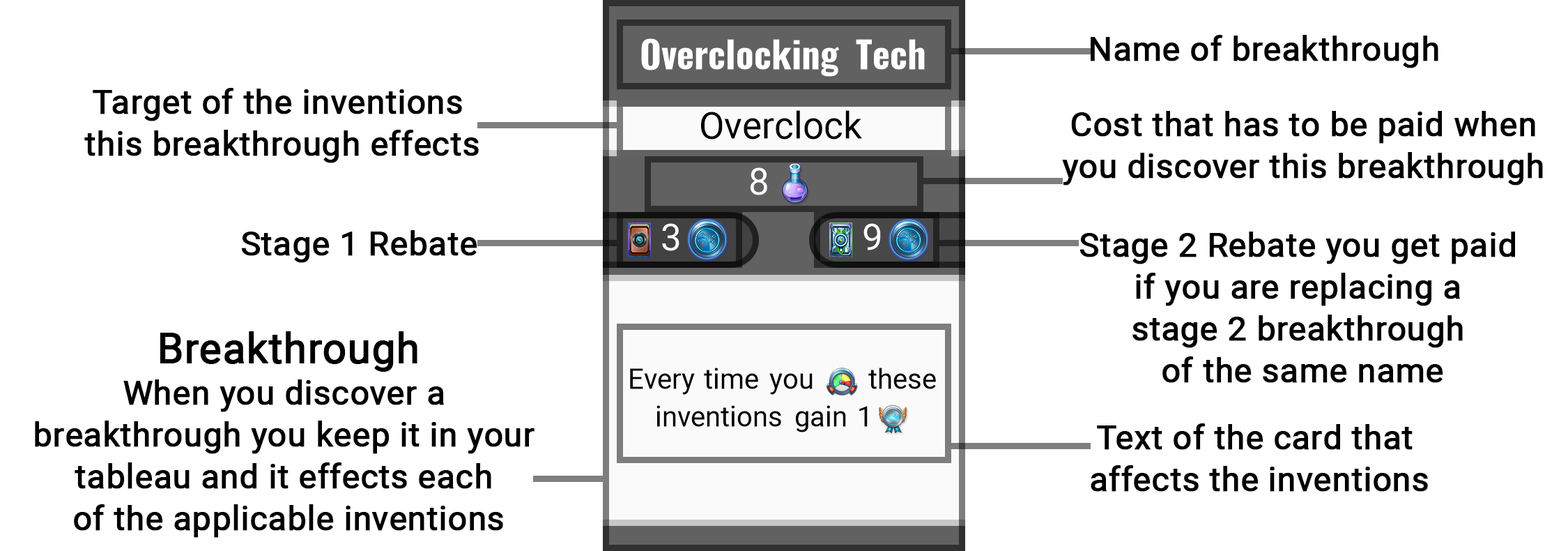
<style>
.page{position:relative;width:1568px;height:551px;background:#ffffff}
.page>*{position:absolute;margin:0}
.t1{font:33.5px "Roboto-Regular";color:#000000;font-weight:bold}
.t2{font:33.5px/41.8px "Roboto-Regular";color:#000000;font-weight:bold}
.t3{font:41.8px/41.8px "Roboto-Regular";color:#000000;font-weight:bold}
</style>
<div class="page">
<p class="t1" style="left:1091px;top:35px;width:347px;height:33px">Name of breakthrough</p>
<p class="t2" style="left:84px;top:88px;width:395px;height:75px;text-align:center">Target of the inventions <br>this breakthrough effects</p>
<p class="t2" style="left:1062px;top:111px;width:481px;height:74px;text-align:center">Cost that has to be paid when <br>you discover this breakthrough</p>
<p class="t1" style="left:241px;top:230px;width:236px;height:33px">Stage 1 Rebate</p>
<p class="t2" style="left:1079px;top:231px;width:436px;height:152px;text-align:center">Stage 2 Rebate you get paid <br>if you are replacing a <br>stage 2 breakthrough <br>of the same name</p>
<p class="t2" style="left:35px;top:331px;width:500px;height:206px;text-align:center"><span class="t3">Breakthrough<br></span>When you discover a <br>breakthrough you keep it in your <br>tableau and it effects each <br>of the applicable inventions</p>
<p class="t2" style="left:1091px;top:423px;width:337px;height:68px;text-align:center">Text of the card that <br>affects the inventions</p>
</div>
